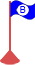
<style>
.page{position:relative;width:35px;height:65px;background:#ffffff}
.page>*{position:absolute;margin:0}
.t1{font:9px "ArialMT";color:#0000ff}
</style>
<div class="page">
<p class="t1" style="left:20px;top:6px;width:6px;height:7px">B</p>
</div>
